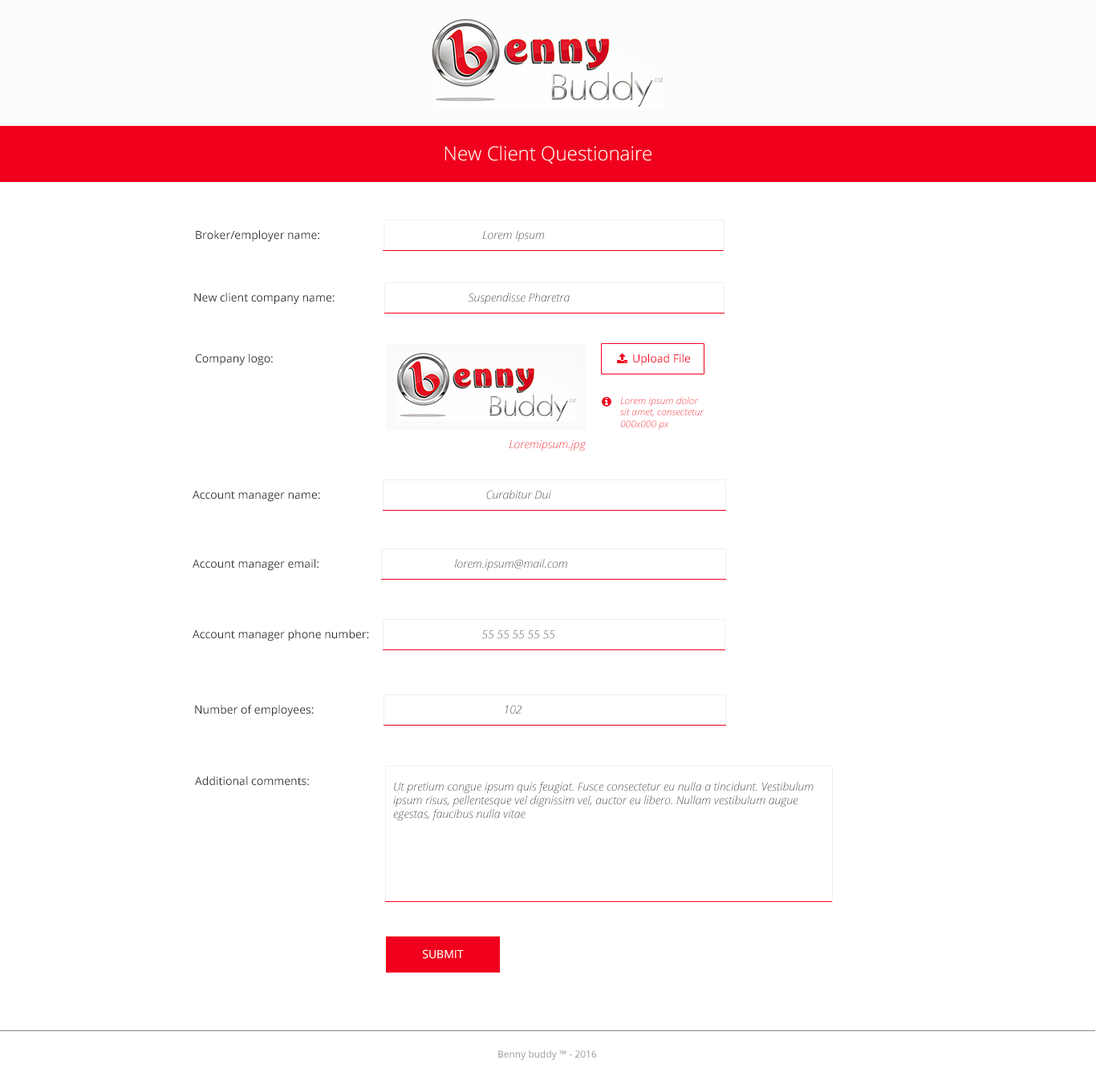
<style>
.page{position:relative;width:1096px;height:1088px;background:#ffffff}
.page>*{position:absolute;margin:0}
.t1{font:19.2px "OpenSans-Light";color:#ffffff}
.t2{font:11.2px "OpenSans";color:#2e2e2e}
.t3{font:11.2px "OpenSansLight-Italic"}
.t4{font:11.2px "OpenSansLight-Italic";color:#2e2e2e}
.t5{font:9.6px "OpenSansLight-Italic"}
.t6{font:11.2px "OpenSans";color:#ffffff}
.t7{font:9.6px "OpenSans";color:#979696}
</style>
<div class="page">
<p class="t1" style="left:445px;top:145px;width:206px;height:19px">New Client Questionaire</p>
<p class="t2" style="left:196px;top:230px;width:123px;height:12px">Broker/employer name:</p>
<p class="t3" style="left:482px;top:231px;width:63px;height:11px">Lorem Ipsum</p>
<p class="t2" style="left:194px;top:293px;width:140px;height:12px">New client company name:</p>
<p class="t4" style="left:468px;top:293px;width:101px;height:12px">Suspendisse Pharetra</p>
<p class="t2" style="left:195px;top:354px;width:78px;height:12px">Company logo:</p>
<p class="t5" style="left:620px;top:397px;width:84px;height:33px">Lorem ipsum dolor<br>sit amet, consectetur<br>000x000 px</p>
<p class="t3" style="left:509px;top:440px;width:77px;height:12px">Loremipsum.jpg</p>
<p class="t2" style="left:192px;top:491px;width:128px;height:11px">Account manager name:</p>
<p class="t3" style="left:486px;top:490px;width:65px;height:10px">Curabitur Dui</p>
<p class="t2" style="left:192px;top:559px;width:126px;height:12px">Account manager email:</p>
<p class="t4" style="left:454px;top:559px;width:113px;height:12px">lorem.ipsum@mail.com</p>
<p class="t2" style="left:192px;top:630px;width:177px;height:12px">Account manager phone number:</p>
<p class="t3" style="left:481px;top:630px;width:74px;height:9px">55 55 55 55 55</p>
<p class="t2" style="left:195px;top:705px;width:119px;height:12px">Number of employees:</p>
<p class="t3" style="left:505px;top:705px;width:16px;height:10px">102</p>
<p class="t2" style="left:195px;top:776px;width:114px;height:10px">Additional comments:</p>
<p class="t4" style="left:393px;top:782px;width:420px;height:39px">Ut pretium congue ipsum quis feugiat. Fusce consectetur eu nulla a tincidunt. Vestibulum<br>ipsum risus, pellentesque vel dignissim vel, auctor eu libero. Nullam vestibulum augue<br>egestas, faucibus nulla vitae</p>
<p class="t6" style="left:423px;top:950px;width:41px;height:9px">SUBMIT</p>
<p class="t7" style="left:498px;top:1051px;width:99px;height:9px">Benny buddy ™ - 2016</p>
</div>
